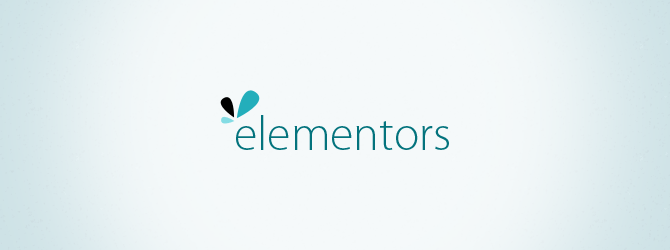
<style>
.page{position:relative;width:670px;height:250px;background:#f5f9fa}
.page>*{position:absolute;margin:0}
.t1{font:48px "MyriadPro-Light";color:#03737d}
</style>
<div class="page">
<p class="t1" style="left:236px;top:115px;width:213px;height:35px">elementors</p>
</div>
